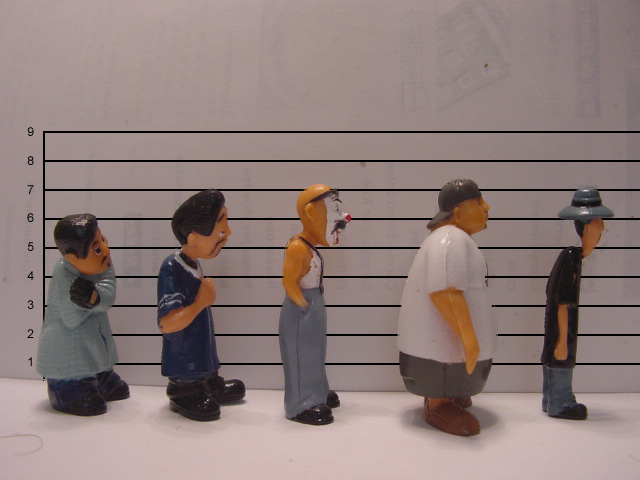
<style>
.page{position:relative;width:640px;height:480px}
.page>*{position:absolute;margin:0}
.t1{font:12px "ArialMT";color:#000000}
</style>
<div class="page">
<p class="t1" style="left:27px;top:127px;width:7px;height:239px;text-align:right">9<br><br>8<br><br>7<br><br>6<br><br>5<br><br>4<br><br>3<br><br>2<br><br>1</p>
</div>
